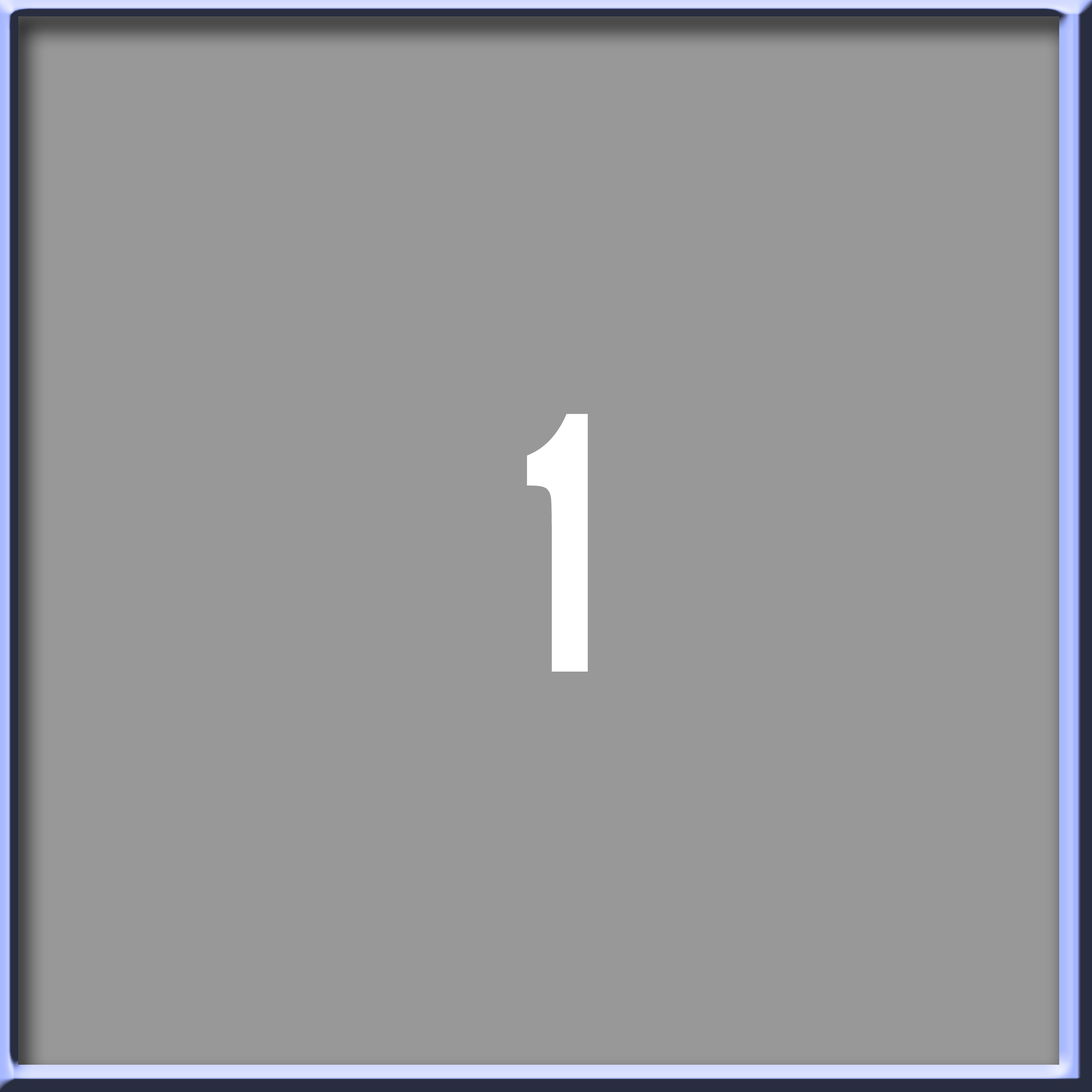
<style>
.page{position:relative;width:1092px;height:1092px;background:#989898}
.page>*{position:absolute;margin:0}
.t1{font:325.8px "Impact";letter-spacing:0.02em;color:#ffffff;scale:0.56 1}
</style>
<div class="page">
<p class="t1" style="left:527px;top:414px;width:61px;height:258px">1</p>
</div>
